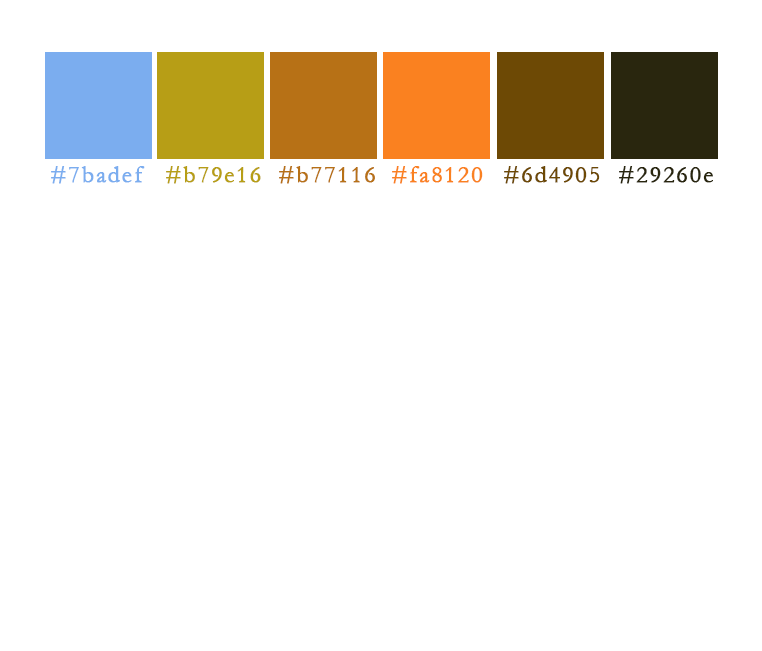
<style>
.page{position:relative;width:762px;height:651px;background:#ffffff}
.page>*{position:absolute;margin:0}
.t1{font:24px "Garamond";letter-spacing:0.06em;color:#7badef;font-weight:bold}
.t2{font:24px "Garamond";letter-spacing:0.06em;color:#b79e16;font-weight:bold}
.t3{font:24px "Garamond";letter-spacing:0.06em;color:#b77116;font-weight:bold}
.t4{font:24px "Garamond";letter-spacing:0.06em;color:#fa8120;font-weight:bold}
.t5{font:24px "Garamond";letter-spacing:0.06em;color:#6d4905;font-weight:bold}
.t6{font:24px "Garamond";letter-spacing:0.06em;color:#29260e;font-weight:bold}
</style>
<div class="page">
<p class="t1" style="left:51px;top:166px;width:94px;height:18px">#7badef</p>
<p class="t2" style="left:166px;top:166px;width:95px;height:18px">#b79e16</p>
<p class="t3" style="left:279px;top:166px;width:96px;height:18px">#b77116</p>
<p class="t4" style="left:392px;top:166px;width:91px;height:18px">#fa8120</p>
<p class="t5" style="left:504px;top:166px;width:96px;height:18px">#6d4905</p>
<p class="t6" style="left:619px;top:166px;width:94px;height:18px">#29260e</p>
</div>
